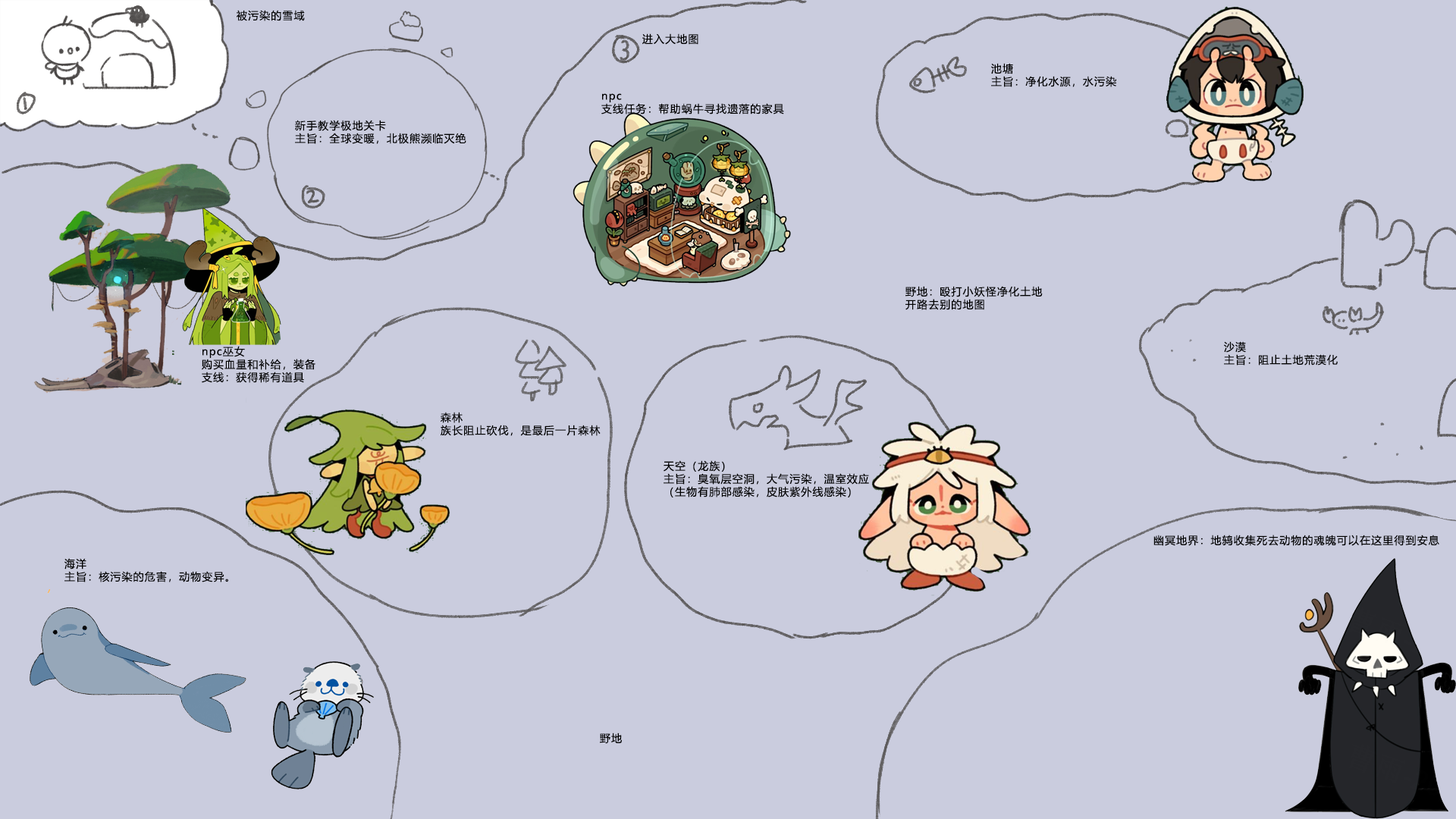
<style>
.page{position:relative;width:1456px;height:819px;background:#caccde}
.page>*{position:absolute;margin:0}
.t1{font:10.6px "MicrosoftYaHei";letter-spacing:0.08em;color:#000000}
.t2{font:10.6px/12.9px "MicrosoftYaHei";letter-spacing:0.08em;color:#000000}
</style>
<div class="page">
<p class="t1" style="left:237px;top:10px;width:68px;height:11px">被污染的雪域</p>
<p class="t1" style="left:642px;top:33px;width:56px;height:12px">进入大地图</p>
<p class="t2" style="left:991px;top:63px;width:125px;height:24px">池塘<br>主旨：净化水源，水污染</p>
<p class="t2" style="left:601px;top:93px;width:183px;height:22px">npc<br>支线任务：帮助蜗牛寻找遗落的家具</p>
<p class="t2" style="left:295px;top:120px;width:171px;height:24px">新手教学极地关卡<br>主旨：全球变暖，北极熊濒临灭绝</p>
<p class="t2" style="left:905px;top:286px;width:138px;height:24px">野地：殴打小妖怪净化土地<br>开路去别的地图</p>
<p class="t2" style="left:1224px;top:341px;width:114px;height:25px">沙漠<br>主旨：阻止土地荒漠化</p>
<p class="t2" style="left:202px;top:346px;width:113px;height:37px">npc巫女<br>购买血量和补给，装备<br>支线：获得稀有道具</p>
<p class="t2" style="left:441px;top:412px;width:160px;height:24px">森林<br>族长阻止砍伐，是最后一片森林</p>
<p class="t2" style="left:664px;top:460px;width:205px;height:37px">天空（龙族）<br>主旨：臭氧层空洞，大气污染，温室效应<br>（生物有肺部感染，皮肤紫外线感染）</p>
<p class="t1" style="left:1153px;top:535px;width:286px;height:11px">幽冥地界：地鸫收集死去动物的魂魄可以在这里得到安息</p>
<p class="t2" style="left:64px;top:558px;width:164px;height:24px">海洋<br>主旨：核污染的危害，动物变异。</p>
<p class="t1" style="left:600px;top:733px;width:22px;height:11px">野地</p>
</div>
